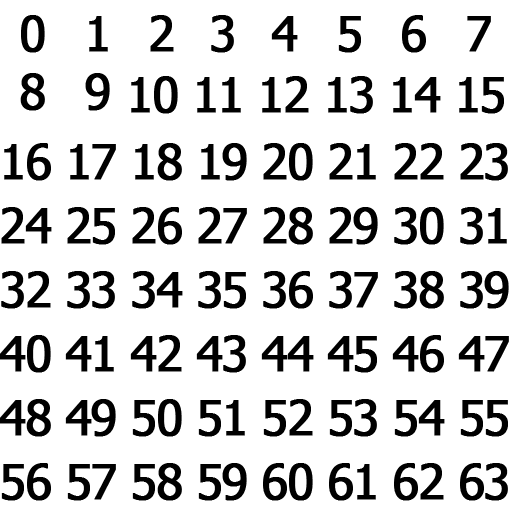
<style>
.page{position:relative;width:512px;height:512px;background:#ffffff}
.page>*{position:absolute;margin:0}
.t1{font:48px "Tahoma";letter-spacing:0.22em;color:#000000;font-weight:bold}
.t2{font:48px "Tahoma";letter-spacing:-0.04em;color:#000000;font-weight:bold}
.t3{font:48px/64px "Tahoma";letter-spacing:-0.04em;color:#000000;font-weight:bold}
</style>
<div class="page">
<p class="t1" style="left:20px;top:15px;width:471px;height:96px">0 1 2 3 4 5 6 7<br>8 9</p>
<p class="t2" style="left:131px;top:76px;width:373px;height:38px">10 11 12 13 14 15</p>
<p class="t3" style="left:0px;top:143px;width:509px;height:358px">16 17 18 19 20 21 22 23<br>24 25 26 27 28 29 30 31<br>32 33 34 35 36 37 38 39<br>40 41 42 43 44 45 46 47<br>48 49 50 51 52 53 54 55<br>56 57 58 59 60 61 62 63</p>
</div>
